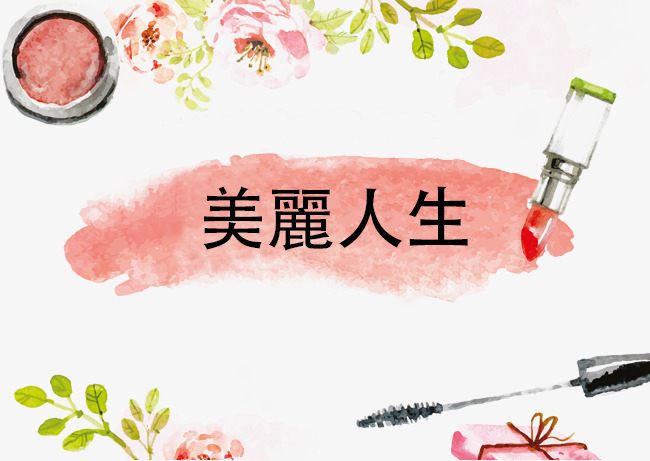
<style>
.page{position:relative;width:650px;height:461px;background:#f6f6f6}
.page>*{position:absolute;margin:0}
.t1{font:69.8px "AdobeHeitiStd-Regular";letter-spacing:-0.02em;color:#030303;text-transform:uppercase}
</style>
<div class="page">
<p class="t1" style="left:203px;top:186px;width:265px;height:65px">美麗人生</p>
</div>
